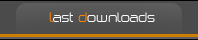
<style>
.page{position:relative;width:198px;height:40px}
.page>*{position:absolute;margin:0}
.t1{font:12px "Birdman";color:#ffffff}
.t2{font:12px "Birdman";color:#ff8400}
</style>
<div class="page">
<p class="t1" style="left:49px;top:12px;width:106px;height:10px"><span class="t2">             l</span>ast <span class="t2">d</span>ownloads</p>
</div>
